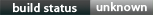
<style>
.page{position:relative;width:153px;height:15px}
.page>*{position:absolute;margin:0}
.t1{font:12.3px "MyriadPro-Regular";letter-spacing:0.01em;color:#ffffff;font-weight:bold}
</style>
<div class="page">
<p class="t1" style="left:13px;top:3px;width:64px;height:10px">build status</p>
<p class="t1" style="left:96px;top:2px;width:51px;height:10px">unknown</p>
</div>
